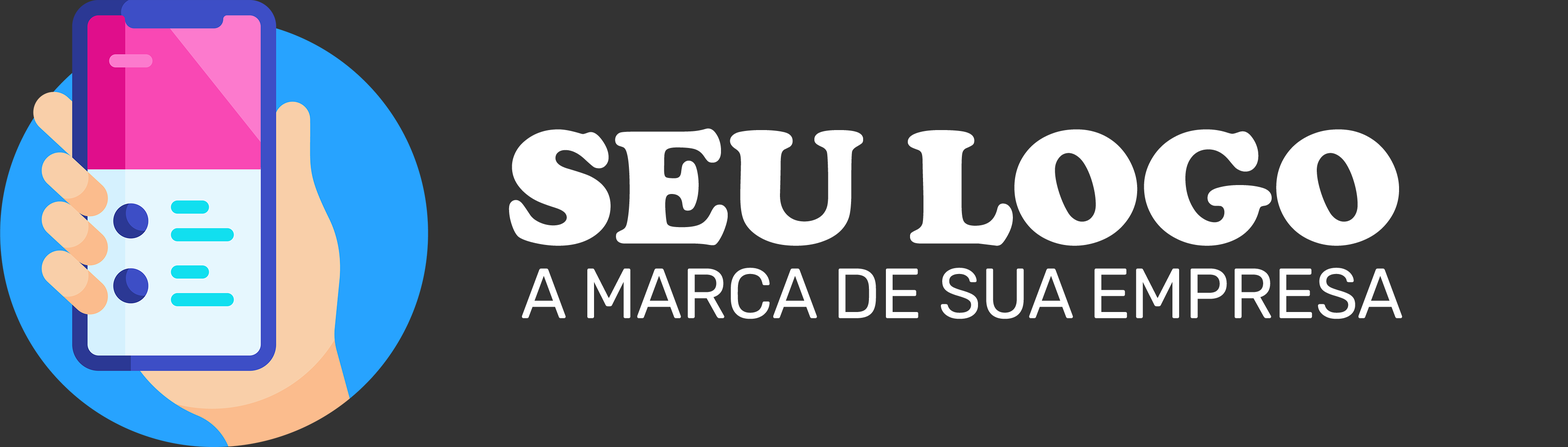
<style>
.page{position:relative;width:1568px;height:447px;background:#333333}
.page>*{position:absolute;margin:0}
.t1{font:167.6px "CooperBlack";letter-spacing:-0.005em;color:#ffffff}
.t2{font:70.8px "Rubik-Regular";letter-spacing:-0.005em;color:#ffffff;text-transform:uppercase}
</style>
<div class="page">
<p class="t1" style="left:509px;top:128px;width:890px;height:118px">SEU LOGO</p>
<p class="t2" style="left:522px;top:268px;width:880px;height:51px">A marca de sua empresa</p>
</div>
